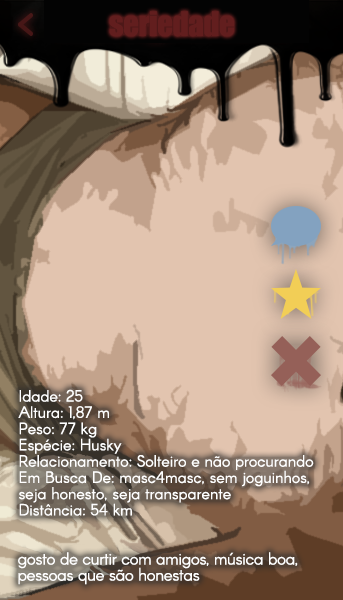
<style>
.page{position:relative;width:343px;height:600px;background:#e2c4af}
.page>*{position:absolute;margin:0}
.t1{font:31px "Impact";letter-spacing:-0.015em;color:#621e1e}
.t2{font:16px "Arcon-Regular";color:#ffffff}
.t3{font:17px/19px "Arcon-Regular";letter-spacing:-0.022em;color:#ffffff}
</style>
<div class="page">
<p class="t1" style="left:109px;top:11px;width:125px;height:26px">seriedade</p>
<p class="t2" style="left:18px;top:389px;width:296px;height:127px">Idade: 25<br>Altura: 1,87 m<br>Peso: 77 kg<br>Espécie: Husky<br>Relacionamento: Solteiro e não procurando<br>Em Busca De: masc4masc, sem joguinhos,<br>seja honesto, seja transparente<br>Distância: 54 km</p>
<p class="t3" style="left:18px;top:552px;width:280px;height:33px">gosto de curtir com amigos, música boa,<br>pessoas que são honestas</p>
</div>
